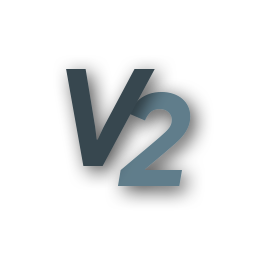
<style>
.page{position:relative;width:256px;height:256px;background:#ffffff}
.page>*{position:absolute;margin:0}
.t1{font:135.3px "ProductSans-BoldItalic";letter-spacing:-0.22em;color:#37474f}
.t2{font:135.3px "ProductSans-BoldItalic";letter-spacing:-0.22em;color:#607d8b}
</style>
<div class="page">
<p class="t1" style="left:66px;top:69px;width:89px;height:97px">V</p>
<p class="t2" style="left:117px;top:92px;width:74px;height:94px">2</p>
</div>
